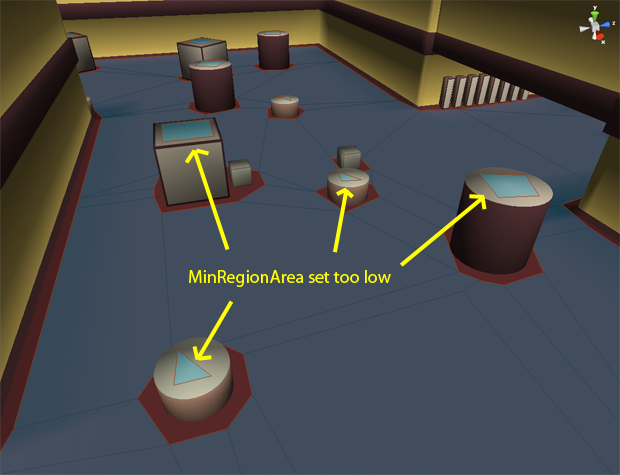
<style>
.page{position:relative;width:620px;height:475px;background:#414c5d}
.page>*{position:absolute;margin:0}
.t1{font:18px "MyriadPro-Regular";color:#ffff00}
</style>
<div class="page">
<p class="t1" style="left:189px;top:270px;width:202px;height:17px">MinRegionArea set too low</p>
</div>
